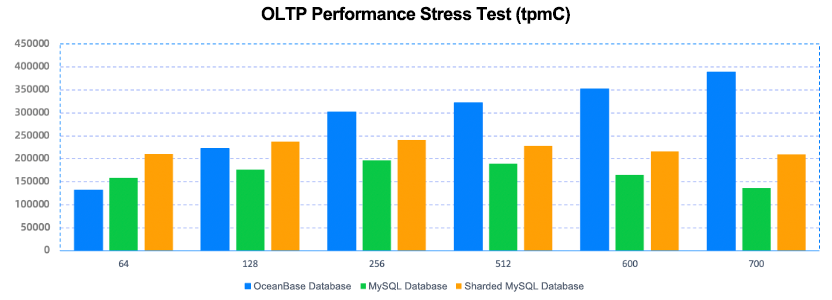
<style>
.page{position:relative;width:832px;height:300px;background:#ffffff}
.page>*{position:absolute;margin:0}
.t1{font:18px "Arial-BoldMT";letter-spacing:-0.03em;color:#000000}
.t2{font:10px "ArialMT";color:#556174}
</style>
<div class="page">
<p class="t1" style="left:261px;top:6px;width:309px;height:18px">OLTP Performance Stress Test (tpmC)</p>
<p class="t2" style="left:253px;top:282px;width:98px;height:8px">OceanBase Database</p>
<p class="t2" style="left:369px;top:282px;width:79px;height:10px">MySQL Database</p>
<p class="t2" style="left:464px;top:282px;width:120px;height:10px">Sharded MySQL Database</p>
</div>
